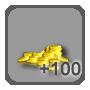
<style>
.page{position:relative;width:90px;height:90px;background:#9a9a9a}
.page>*{position:absolute;margin:0}
.t1{font:18px "ArialMT";color:#494949;font-weight:bold}
</style>
<div class="page">
<p class="t1" style="left:39px;top:61px;width:42px;height:15px">+100</p>
</div>
